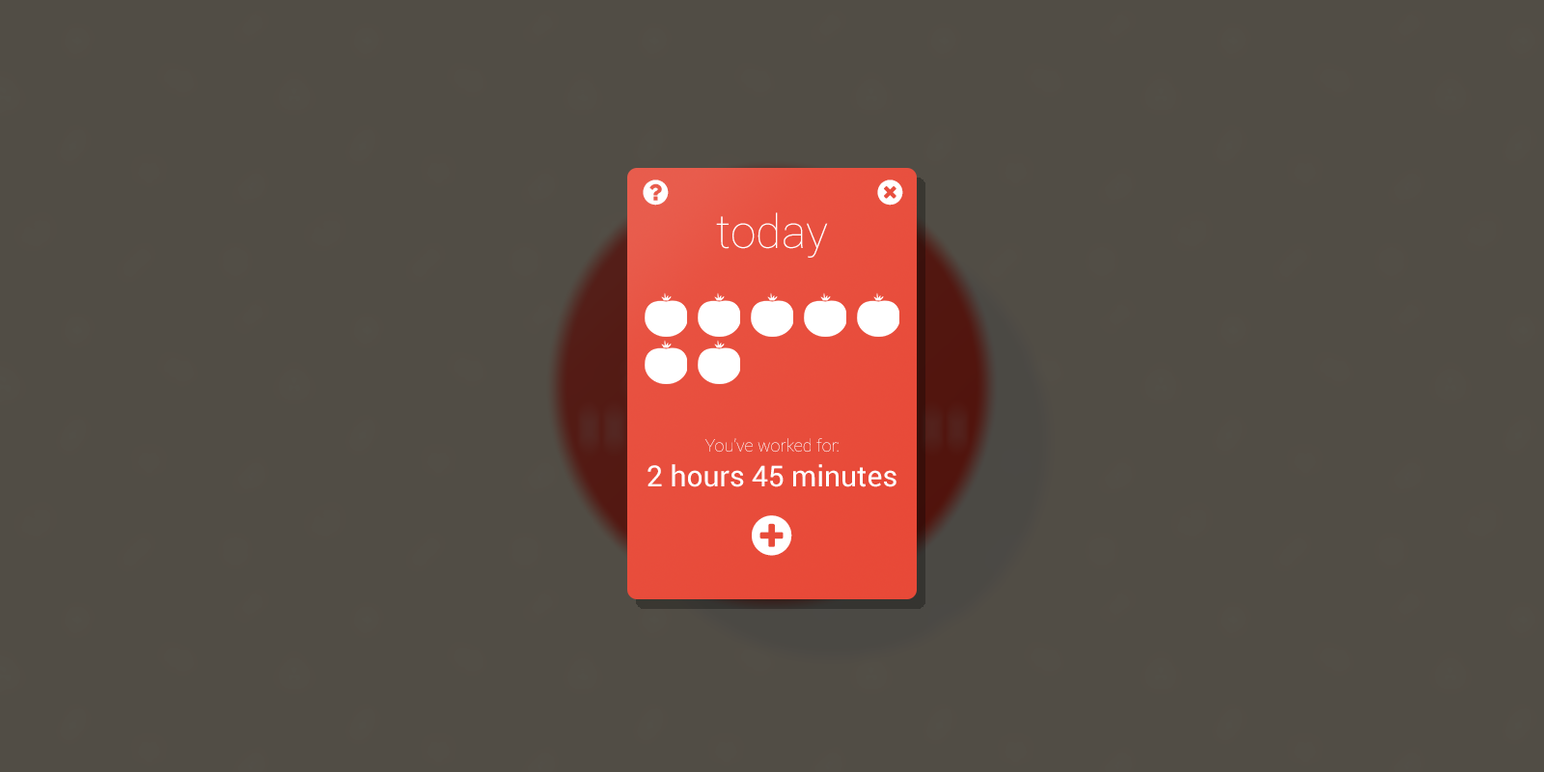
<style>
.page{position:relative;width:1544px;height:772px;background:#514d45}
.page>*{position:absolute;margin:0}
.t1{font:46.3px "Roboto-Thin";color:#ffffff}
.t2{font:17.4px "Roboto-Thin";color:#ffffff}
.t3{font:29px "Roboto-Regular";color:#ffffff}
</style>
<div class="page">
<p class="t1" style="left:716px;top:212px;width:112px;height:46px">today</p>
<p class="t2" style="left:648px;top:438px;width:249px;height:49px;text-align:center">You’ve worked for:<br><span class="t3">2 hours 45 minutes</span></p>
</div>
